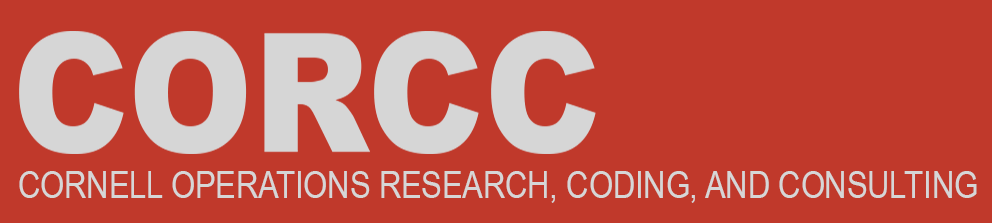
<style>
.page{position:relative;width:992px;height:223px;background:#c0392b}
.page>*{position:absolute;margin:0}
.t1{font:37.5px "ArialNarrow";color:#d6d6d6}
</style>
<div class="page">
<p class="t1" style="left:19px;top:171px;width:958px;height:32px">CORNELL OPERATIONS RESEARCH, CODING, AND CONSULTING</p>
</div>
